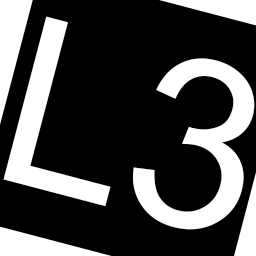
<style>
.page{position:relative;width:256px;height:256px;background:#000000}
.page>*{position:absolute;margin:0}
.t1{font:235px "ArialMT";color:#ffffff}
</style>
<div class="page">
<p class="t1" style="left:3px;top:16px;width:252px;height:214px;rotate:15deg">L3</p>
</div>
